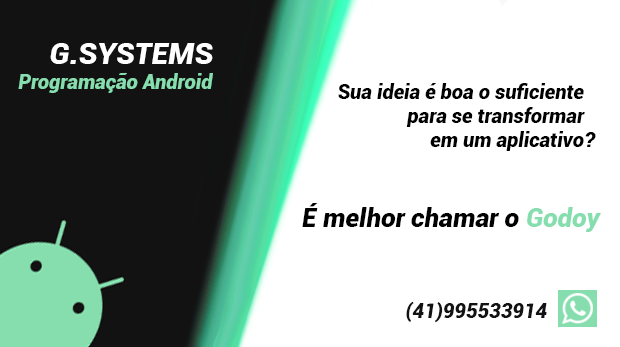
<style>
.page{position:relative;width:620px;height:347px;background:#ffffff}
.page>*{position:absolute;margin:0}
.t1{font:30px "Roboto-BlackItalic";color:#ffffff}
.t2{font:20px "Roboto-BlackItalic";color:#86deae}
.t3{font:20px "Roboto-BlackItalic";color:#000100}
.t4{font:20px "Roboto-BlackItalic";color:#000000}
.t5{font:26px "Roboto-BlackItalic";color:#000000}
.t6{font:26px "Roboto-BlackItalic";color:#86deae}
.t7{font:20px "Roboto-BlackItalic";color:#121212}
</style>
<div class="page">
<p class="t1" style="left:50px;top:43px;width:163px;height:21px">G.SYSTEMS</p>
<p class="t2" style="left:18px;top:72px;width:195px;height:21px">Programação Android</p>
<p class="t3" style="left:338px;top:83px;width:247px;height:68px">Sua ideia é boa o suficiente <br>para se transformar <br>em um aplicativo</p>
<p class="t4" style="left:585px;top:132px;width:11px;height:15px">?</p>
<p class="t5" style="left:302px;top:203px;width:299px;height:29px">É melhor chamar o <span class="t6">Godoy</span></p>
<p class="t7" style="left:406px;top:301px;width:141px;height:22px">995533914(41)</p>
</div>
